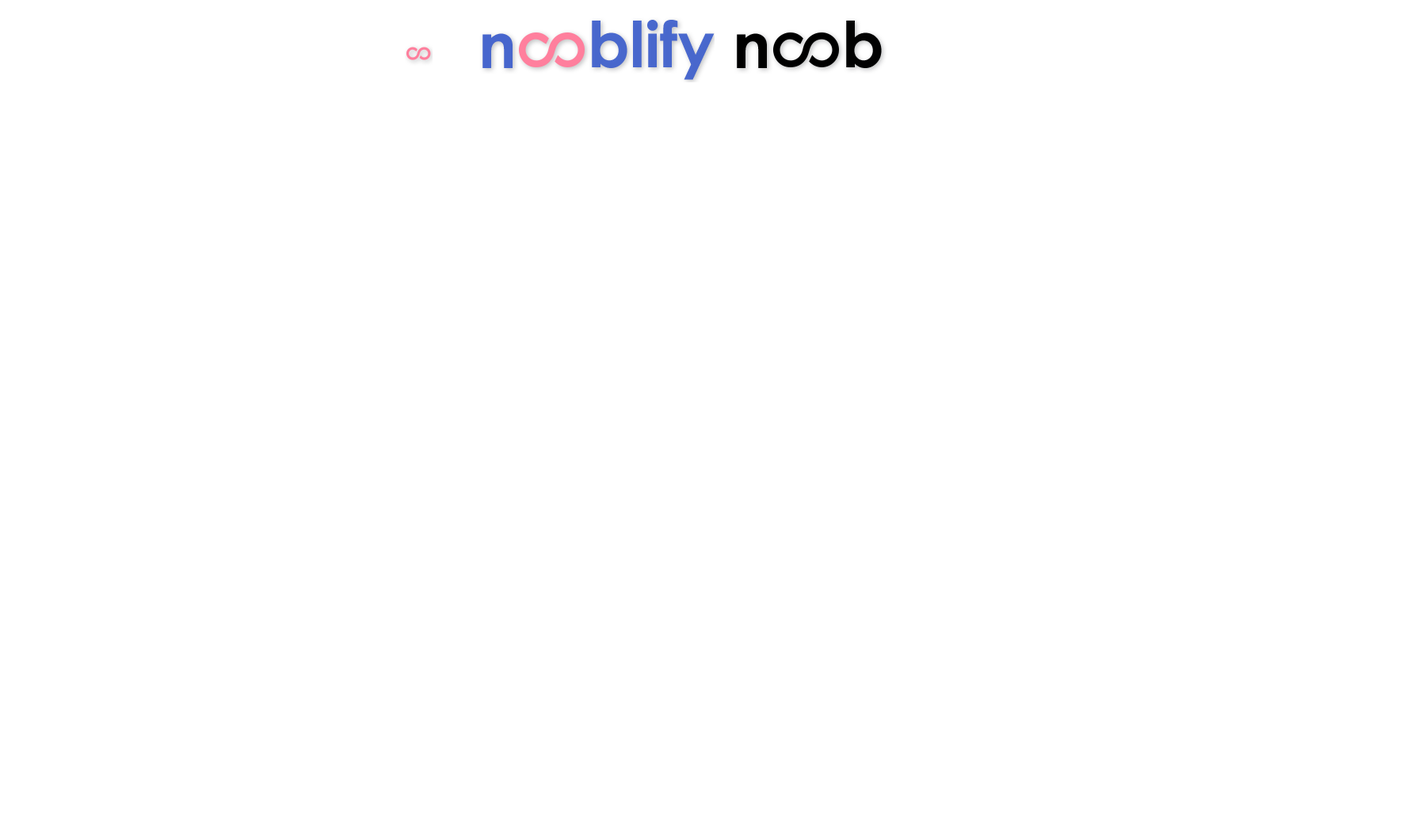
<style>
.page{position:relative;width:1426px;height:836px;background:#ffffff}
.page>*{position:absolute;margin:0}
.t1{font:63.4px "CenturyGothic-Bold";color:#4766cd}
.t2{font:63.4px "CenturyGothic-Bold";color:#000000}
</style>
<div class="page">
<p class="t1" style="left:592px;top:20px;width:122px;height:60px">blify</p>
<p class="t2" style="left:846px;top:21px;width:36px;height:47px">b</p>
<p class="t1" style="left:482px;top:33px;width:30px;height:35px">n</p>
<p class="t2" style="left:737px;top:33px;width:30px;height:35px">n</p>
</div>
